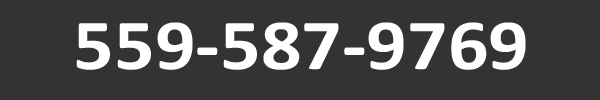
<style>
.page{position:relative;width:600px;height:100px;background:#333333}
.page>*{position:absolute;margin:0}
.t1{font:72.6px "Calibri-Bold";color:#ffffff;scale:1.11 1}
</style>
<div class="page">
<p class="t1" style="left:76px;top:22px;width:450px;height:48px">559-587-9769</p>
</div>
